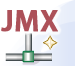
<style>
.page{position:relative;width:75px;height:66px;background:#ffffff}
.page>*{position:absolute;margin:0}
.t1{font:30px "MyriadPro-Semibold";color:#ac5159;font-weight:bold}
</style>
<div class="page">
<p class="t1" style="left:1px;top:10px;width:57px;height:22px">JMX</p>
</div>
